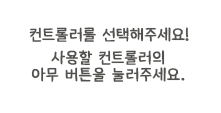
<style>
.page{position:relative;width:221px;height:113px;background:#ffffff}
.page>*{position:absolute;margin:0}
.t1{font:16px/17px "XiaolaiSC";letter-spacing:-0.075em;color:#53514e;font-weight:bold}
.t2{font:16px/6px "XiaolaiSC";letter-spacing:-0.075em;color:#53514e;font-weight:bold}
</style>
<div class="page">
<p class="t1" style="left:29px;top:27px;width:160px;height:55px;text-align:center"><span class="t2">컨트롤러를 선택해주세요!<br></span><br>사용할 컨트롤러의<br>아무 버튼을 눌러주세요.</p>
</div>
